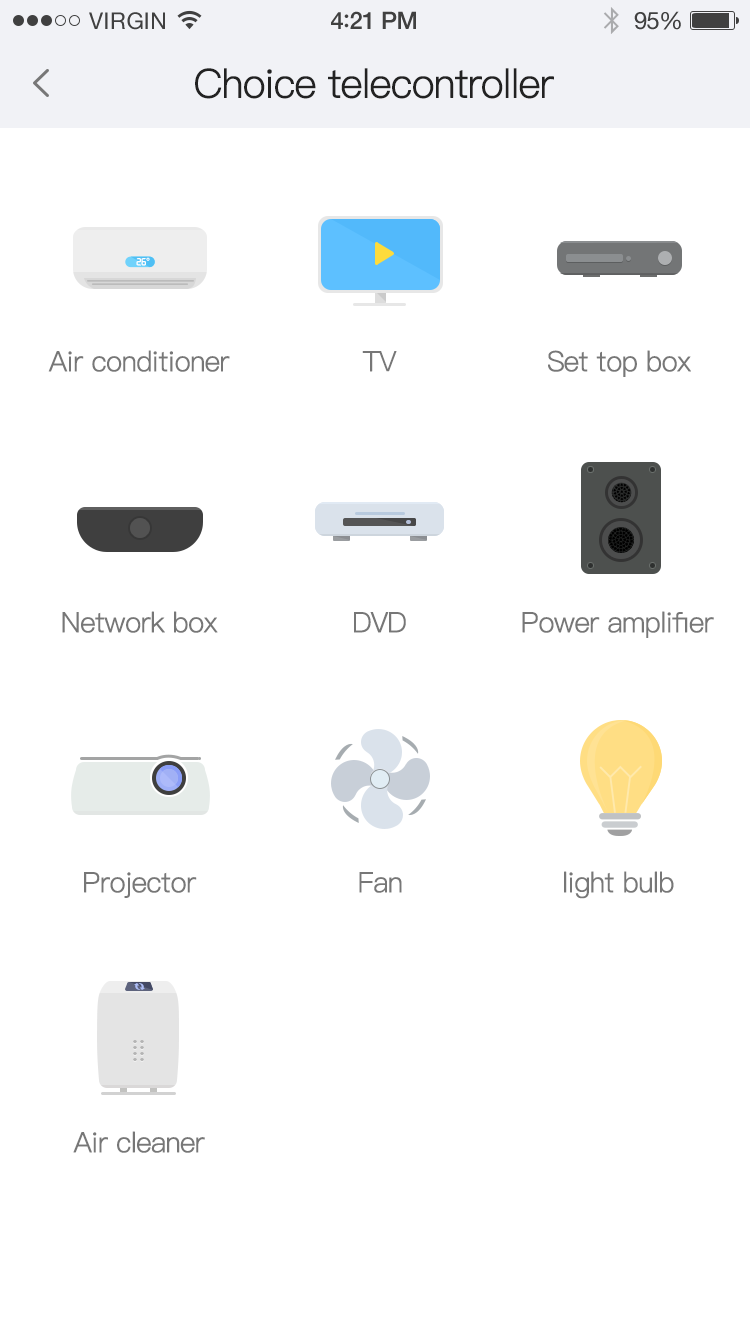
<style>
.page{position:relative;width:750px;height:1334px;background:#ffffff}
.page>*{position:absolute;margin:0}
.t1{font:23px "HelveticaNeue";letter-spacing:0.02em;color:#404040}
.t2{font:24px "HelveticaNeue-Medium";letter-spacing:-0.02em;color:#404040}
.t3{font:26px "Avenir-Medium";letter-spacing:-0.02em;color:#404040}
.t4{font:24px "HelveticaNeue";letter-spacing:-0.02em;color:#404040}
.t5{font:40px "PingFang-SC-Regular";letter-spacing:-0.05em;color:#222222;font-weight:bold}
.t6{font:10.3px "Digiface";letter-spacing:-0.05em;color:#ffffff;font-weight:bold}
.t7{font:28px "PingFang-SC-Regular";letter-spacing:-0.05em;color:#777777;font-weight:bold}
</style>
<div class="page">
<p class="t1" style="left:89px;top:12px;width:76px;height:18px">VIRGIN</p>
<p class="t2" style="left:331px;top:11px;width:85px;height:18px">4<span class="t3">:</span>21 PM</p>
<p class="t4" style="left:634px;top:11px;width:47px;height:19px">95%</p>
<p class="t5" style="left:195px;top:68px;width:359px;height:31px">Choice telecontroller</p>
<p class="t6" style="left:136px;top:257px;width:14px;height:9px">26°</p>
<p class="t7" style="left:48px;top:350px;width:182px;height:22px">Air conditioner</p>
<p class="t7" style="left:362px;top:351px;width:35px;height:21px">TV</p>
<p class="t7" style="left:548px;top:350px;width:143px;height:27px">Set top box</p>
<p class="t7" style="left:62px;top:611px;width:156px;height:22px">Network box</p>
<p class="t7" style="left:354px;top:612px;width:52px;height:21px">DVD</p>
<p class="t7" style="left:522px;top:611px;width:192px;height:27px">Power amplifier</p>
<p class="t7" style="left:84px;top:872px;width:113px;height:26px">Projector</p>
<p class="t7" style="left:359px;top:872px;width:43px;height:21px">Fan</p>
<p class="t7" style="left:564px;top:871px;width:110px;height:28px">light bulb</p>
<p class="t7" style="left:73px;top:1131px;width:132px;height:22px">Air cleaner</p>
</div>
